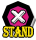
<style>
.page{position:relative;width:36px;height:40px;background:#ffffff}
.page>*{position:absolute;margin:0}
.t1{font:34.6px "Algerian";color:#ffffff}
.t2{font:14.8px "Algerian";color:#fee512;scale:0.65 1}
</style>
<div class="page">
<p class="t1" style="left:11px;top:10px;width:15px;height:14px">×</p>
<p class="t2" style="left:3px;top:26px;width:30px;height:11px">STAND</p>
</div>
